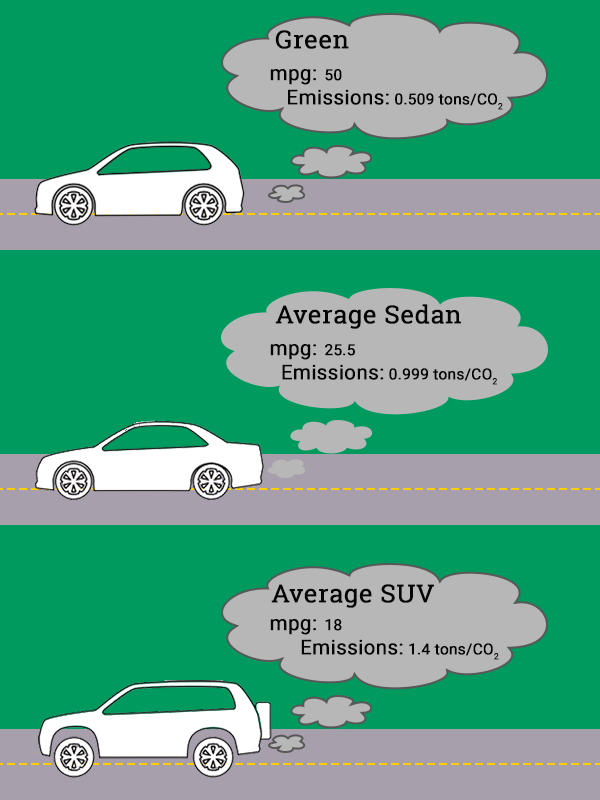
<style>
.page{position:relative;width:600px;height:800px;background:#00995e}
.page>*{position:absolute;margin:0}
.t1{font:25.4px "RobotoSlab-Regular";color:#050505;font-weight:bold}
.t2{font:15.2px "Roboto-Regular";color:#050505;font-weight:bold}
.t3{font:20.3px/18.3px "Roboto-Regular";color:#050505;font-weight:bold}
.t4{font:15.2px/18.3px "Roboto-Regular";color:#050505;font-weight:bold}
.t5{font:20.3px "Roboto-Regular";color:#050505;font-weight:bold}
</style>
<div class="page">
<p class="t1" style="left:275px;top:30px;width:74px;height:19px">Green</p>
<p class="t2" style="left:270px;top:69px;width:233px;height:41px"><span class="t3">mpg: </span><span class="t4">50<br></span><span class="t5">   Emissions:</span> 0.509 tons/CO2</p>
<p class="t1" style="left:275px;top:304px;width:186px;height:25px">Average Sedan</p>
<p class="t2" style="left:270px;top:344px;width:227px;height:41px"><span class="t3">mpg: </span><span class="t4">25.5<br></span><span class="t5">  Emissions:</span> 0.999 tons/CO2</p>
<p class="t1" style="left:271px;top:584px;width:163px;height:24px">Average SUV</p>
<p class="t2" style="left:270px;top:619px;width:229px;height:41px"><span class="t3">mpg: </span><span class="t4">18<br></span><span class="t5"> Emissions:</span> 1.4 tons/CO2</p>
</div>
